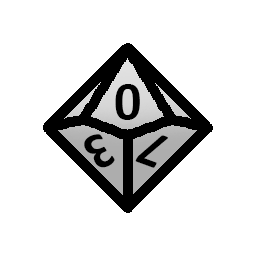
<style>
.page{position:relative;width:256px;height:256px;background:#ffffff}
.page>*{position:absolute;margin:0}
.t1{font:54px "Calibri-Bold";color:#000000}
.t2{font:53.5px "Calibri-Bold";color:#000000;scale:0.91 1}
.t3{font:54px "Calibri-Bold";color:#000000;scale:0.88 1}
</style>
<div class="page">
<p class="t1" style="left:115px;top:84px;width:25px;height:36px">0</p>
<p class="t2" style="left:84px;top:134px;width:31px;height:34px;rotate:156deg">3</p>
<p class="t3" style="left:135px;top:135px;width:33px;height:33px;rotate:-160deg">7</p>
</div>
